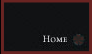
<style>
.page{position:relative;width:92px;height:54px;background:#111214}
.page>*{position:absolute;margin:0}
.t1{font:10px "ArnoPro-Regular";font-variant:small-caps}
</style>
<div class="page">
<p class="t1" style="left:43px;top:35px;width:24px;height:8px">Home</p>
</div>
